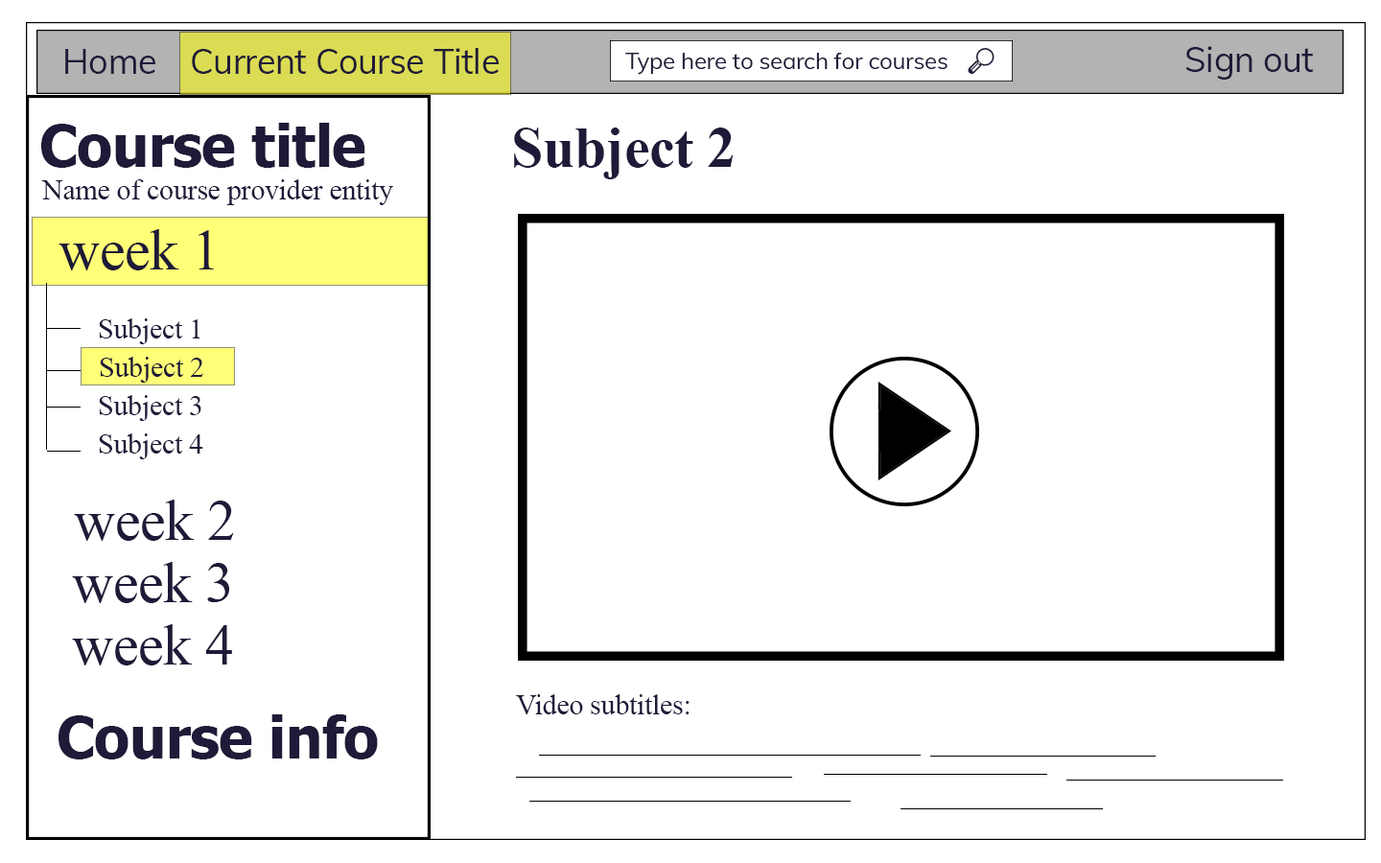
<style>
.page{position:relative;width:1381px;height:863px;background:#ffffff}
.page>*{position:absolute;margin:0}
.t1{font:34.5px "Muli-Regular";letter-spacing:-0.01em;color:#1f1a38}
.t2{font:23px "Muli-Regular";letter-spacing:-0.01em;color:#1f1a38}
.t3{font:23px "SegoeUIEmoji";letter-spacing:-0.01em;color:#1f1a38}
.t4{font:57.6px "Tahoma-Bold";letter-spacing:-0.01em;color:#1f1a38}
.t5{font:57.6px "TimesNewRomanPS-BoldMT";letter-spacing:-0.01em;color:#1f1a38}
.t6{font:28.8px "TimesNewRomanPSMT";letter-spacing:-0.01em;color:#1f1a38}
.t7{font:57.6px "TimesNewRomanPSMT";letter-spacing:-0.01em;color:#1f1a38}
</style>
<div class="page">
<p class="t1" style="left:65px;top:49px;width:90px;height:25px">Home</p>
<p class="t1" style="left:192px;top:48px;width:307px;height:26px">Current Course Title</p>
<p class="t2" style="left:625px;top:47px;width:370px;height:28px">Type here to search for courses   <span class="t3">🔎</span></p>
<p class="t1" style="left:1186px;top:46px;width:127px;height:34px">Sign out</p>
<p class="t4" style="left:41px;top:123px;width:324px;height:45px">Course title</p>
<p class="t5" style="left:514px;top:128px;width:220px;height:51px">Subject 2</p>
<p class="t6" style="left:41px;top:179px;width:352px;height:26px">Name of course provider entity</p>
<p class="t7" style="left:59px;top:229px;width:155px;height:41px">week 1</p>
<p class="t6" style="left:99px;top:318px;width:101px;height:26px">Subject 1</p>
<p class="t6" style="left:100px;top:357px;width:103px;height:26px">Subject 2</p>
<p class="t6" style="left:99px;top:395px;width:102px;height:26px">Subject 3</p>
<p class="t6" style="left:99px;top:434px;width:104px;height:25px">Subject 4</p>
<p class="t7" style="left:74px;top:500px;width:160px;height:41px">week 2</p>
<p class="t7" style="left:72px;top:562px;width:157px;height:41px">week 3</p>
<p class="t7" style="left:72px;top:624px;width:160px;height:42px">week 4</p>
<p class="t6" style="left:516px;top:694px;width:174px;height:21px">Video subtitles:</p>
<p class="t4" style="left:59px;top:715px;width:319px;height:45px">Course info</p>
</div>
